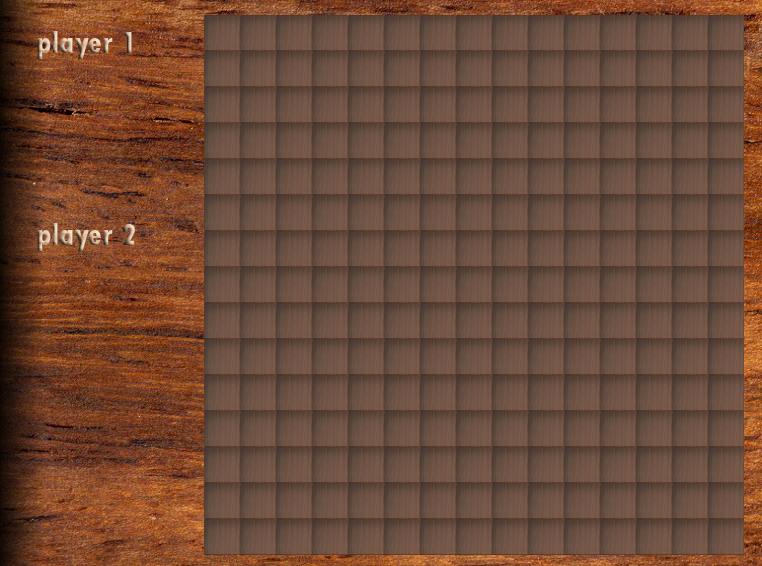
<style>
.page{position:relative;width:762px;height:566px}
.page>*{position:absolute;margin:0}
.t1{font:32px "TwCenMT-CondensedExtraBold"}
</style>
<div class="page">
<p class="t1" style="left:37px;top:31px;width:98px;height:220px">player 1<br><br><br><br><br>player 2</p>
</div>
